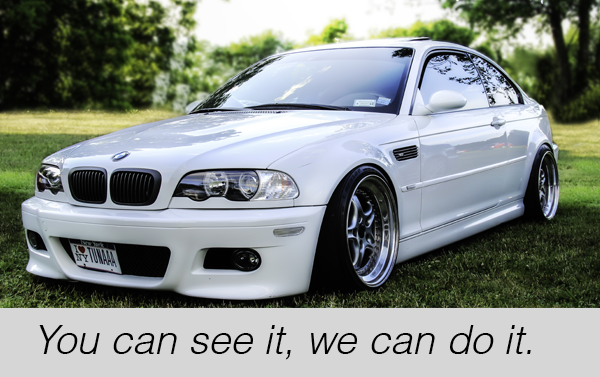
<style>
.page{position:relative;width:600px;height:377px}
.page>*{position:absolute;margin:0}
.t1{font:40px "Helvetica-LightOblique";color:#000000}
</style>
<div class="page">
<p class="t1" style="left:39px;top:325px;width:492px;height:35px">You can see it, we can do it.</p>
</div>
